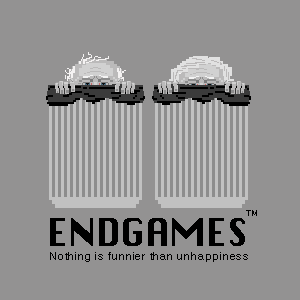
<style>
.page{position:relative;width:300px;height:300px;background:#939292}
.page>*{position:absolute;margin:0}
.t1{font:36.7px "Silom";color:#000000}
.t2{font:9px "DINAlternate-Bold";color:#000000}
.t3{font:11px "Helvetica";letter-spacing:0.07em;color:#000000}
</style>
<div class="page">
<p class="t1" style="left:50px;top:218px;width:195px;height:28px">ENDGAMES</p>
<p class="t2" style="left:246px;top:210px;width:11px;height:6px">TM</p>
<p class="t3" style="left:50px;top:252px;width:198px;height:10px">Nothing is funnier than unhappiness</p>
</div>
